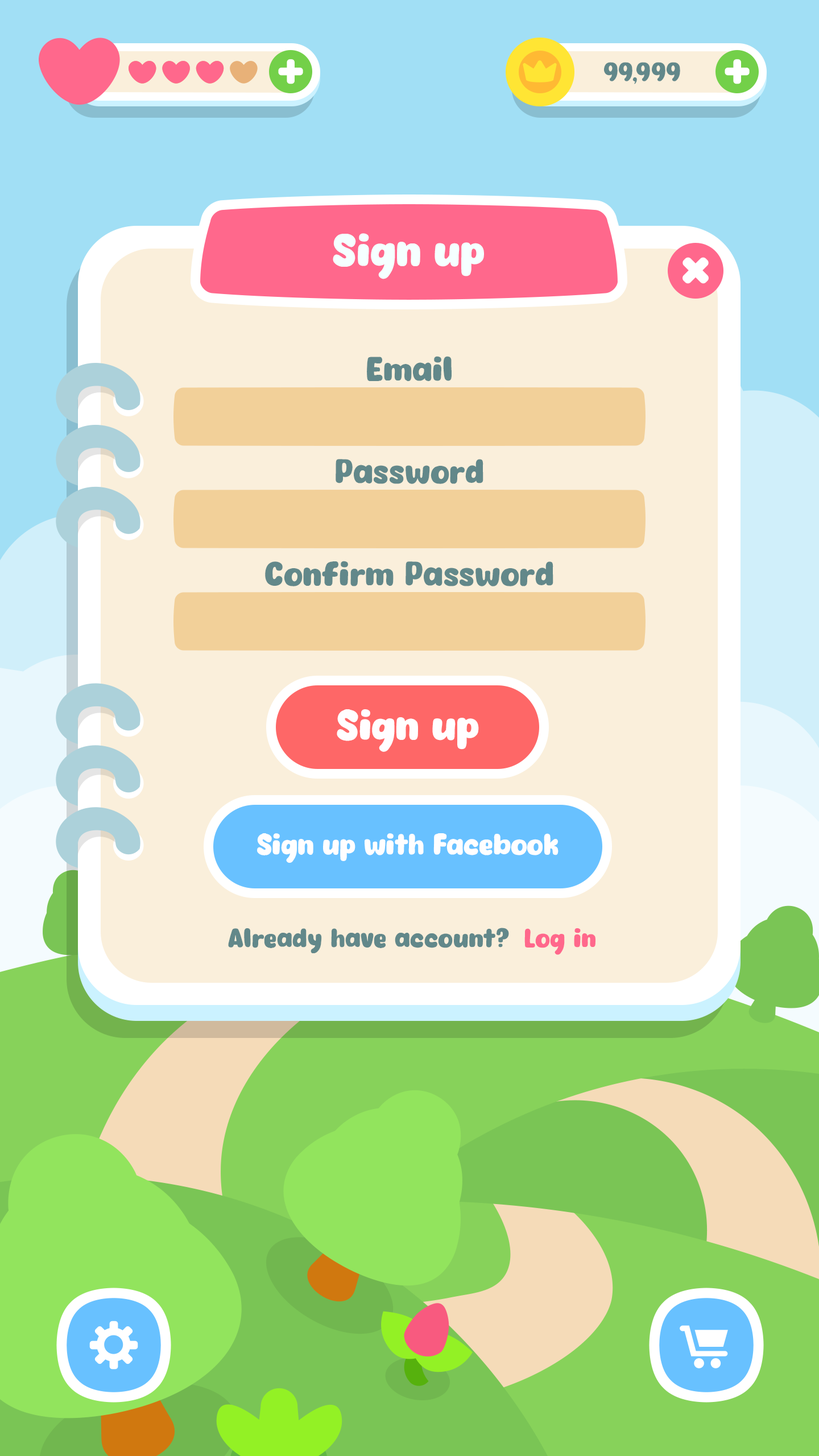
<style>
.page{position:relative;width:819px;height:1456px}
.page>*{position:absolute;margin:0}
.t1{font:43.8px "Eazy-Chat";color:#f5ffff}
.t2{font:32.8px "Eazy-Chat";letter-spacing:0.01em;color:#62888a}
.t3{font:41px "Eazy-Chat";color:#fffeff}
.t4{font:28.4px "Eazy-Chat";color:#fffeff}
.t5{font:25.6px "Eazy-Chat";letter-spacing:0.01em;color:#62888a}
.t6{font:25.6px "Eazy-Chat";letter-spacing:0.01em;color:#ff688c}
</style>
<div class="page">
<p class="t1" style="left:333px;top:233px;width:151px;height:46px">Sign up</p>
<p class="t2" style="left:367px;top:356px;width:85px;height:25px">Email</p>
<p class="t2" style="left:336px;top:459px;width:147px;height:25px">Password</p>
<p class="t2" style="left:265px;top:561px;width:288px;height:25px">Confirm Password</p>
<p class="t3" style="left:337px;top:709px;width:142px;height:43px">Sign up</p>
<p class="t4" style="left:257px;top:833px;width:302px;height:30px">Sign up with Facebook</p>
<p class="t5" style="left:228px;top:928px;width:281px;height:25px">Already have account?</p>
<p class="t6" style="left:524px;top:928px;width:71px;height:27px">Log in</p>
</div>
